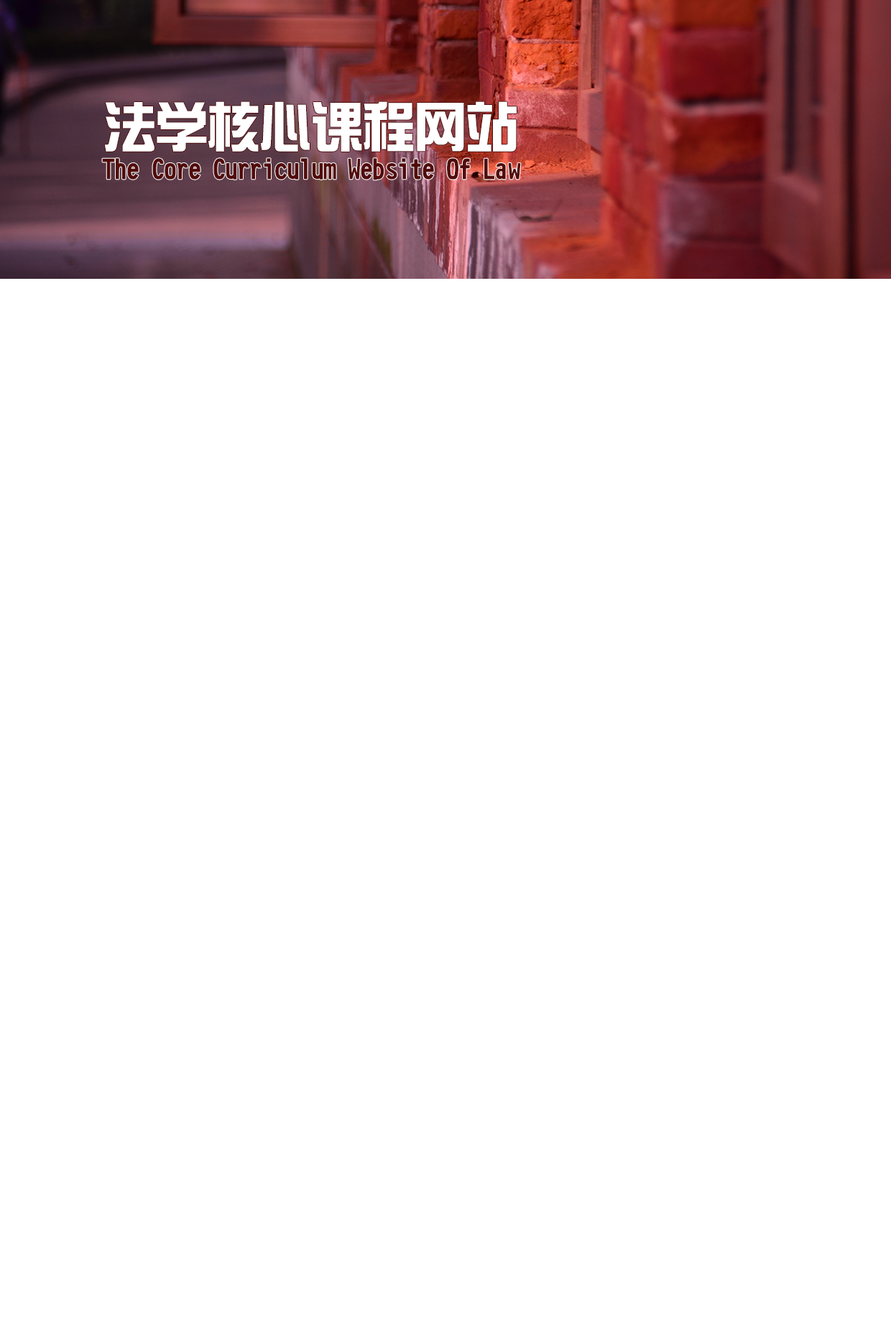
<style>
.page{position:relative;width:891px;height:1338px;background:#ffffff}
.page>*{position:absolute;margin:0}
.t1{font:51.7px "SingYiEG-Ultra-GB";color:#ffffff}
.t2{font:25.9px "SingYiEG-Ultra-GB";letter-spacing:-0.025em;color:#520b0b}
</style>
<div class="page">
<p class="t1" style="left:105px;top:101px;width:412px;height:51px">法学核心课程网站</p>
<p class="t2" style="left:102px;top:158px;width:419px;height:22px">The Core Curriculum Website Of Law</p>
</div>
